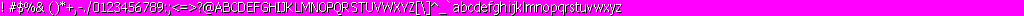
<style>
.page{position:relative;width:1024px;height:16px;background:#ff00ff}
.page>*{position:absolute;margin:0}
.t1{font:14px "Nina";letter-spacing:0.01em;color:#ffffff}
</style>
<div class="page">
<p class="t1" style="left:2px;top:0px;width:619px;height:15px">! #$%&amp; ()*+,-./0123456789:;&lt;=&gt;?@ABCDEFGHIJKLMNOPQRSTUVWXYZ[\]^_`abcdefghijklmnopqrstuvwxyz</p>
</div>
